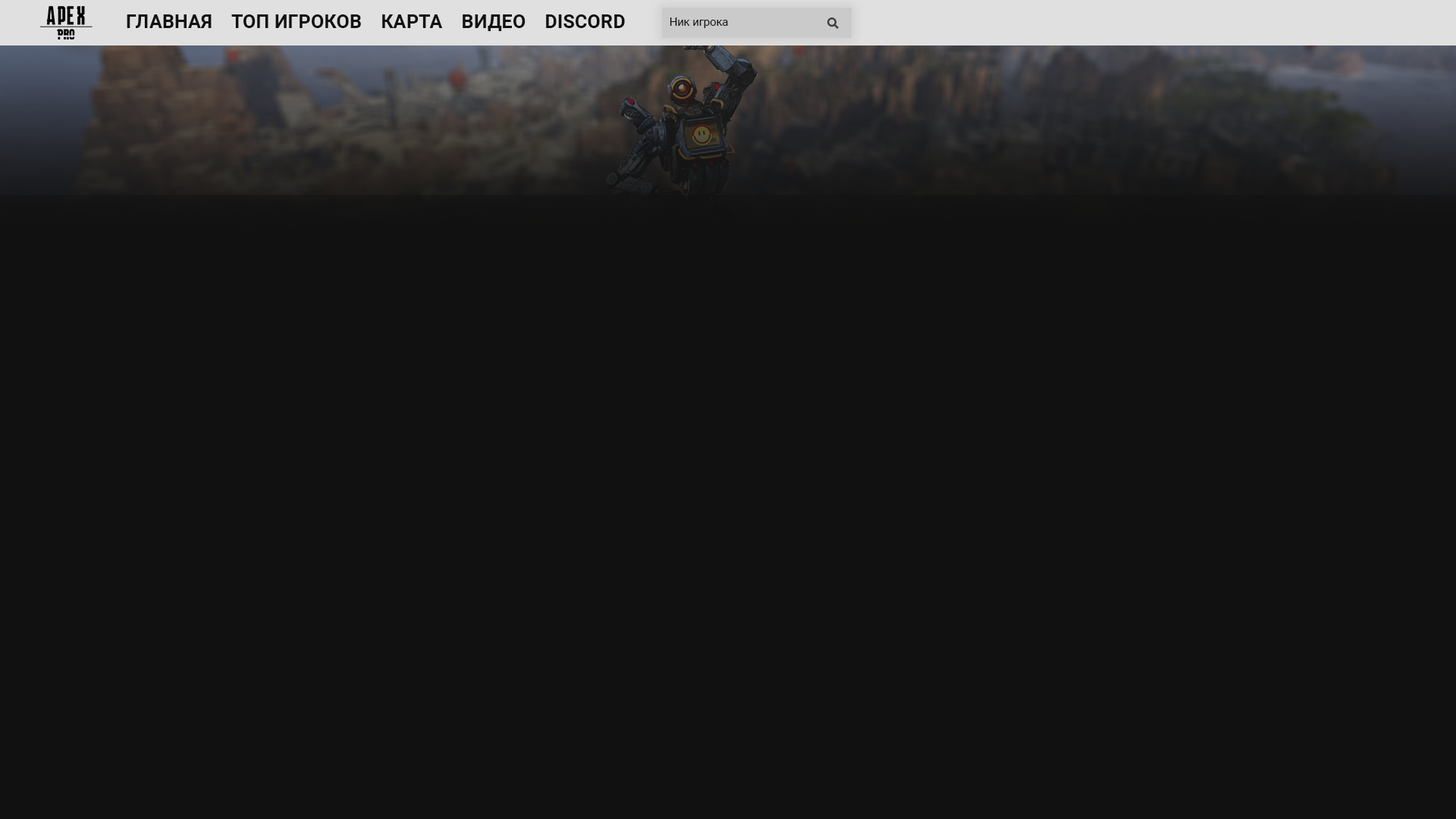
<style>
.page{position:relative;width:1456px;height:819px;background:#111111}
.page>*{position:absolute;margin:0}
.t1{font:19.2px "Roboto-Bold";color:#111111}
.t2{font:11.1px "Roboto-Regular";color:#111111}
</style>
<div class="page">
<p class="t1" style="left:127px;top:14px;width:498px;height:17px">ГЛАВНАЯ    ТОП ИГРОКОВ    КАРТА    ВИДЕО    DISCORD</p>
<p class="t2" style="left:670px;top:17px;width:58px;height:11px">Ник игрока</p>
</div>
